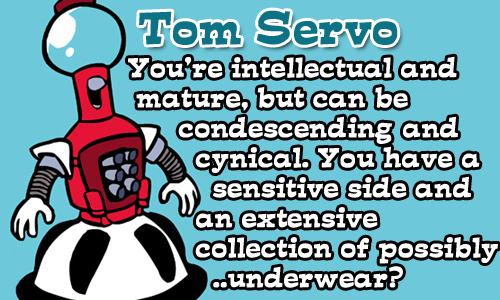
<style>
.page{position:relative;width:500px;height:300px;background:#6dc8da}
.page>*{position:absolute;margin:0}
.t1{font:41.7px "d......";color:#0c7286;font-weight:bold}
.t2{font:25px "d......";color:#ffffff;font-weight:bold}
</style>
<div class="page">
<p class="t1" style="left:139px;top:10px;width:259px;height:35px">Tom Servo</p>
<p class="t2" style="left:128px;top:56px;width:370px;height:232px">You’re intellectual and<br> mature, but can be <br>      condescending and<br>        cynical. You have a<br>          sensitive side and<br>        an extensive <br>        collection of possibly<br>          ..underwear?</p>
</div>
